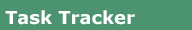
<style>
.page{position:relative;width:192px;height:30px;background:#4c9470}
.page>*{position:absolute;margin:0}
.t1{font:18px "Verdana-Bold";color:#ffffff}
</style>
<div class="page">
<p class="t1" style="left:5px;top:10px;width:130px;height:22px">Task Tracker</p>
</div>
